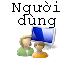
<style>
.page{position:relative;width:71px;height:58px;background:#ffffff}
.page>*{position:absolute;margin:0}
.t1{font:12px/13.3px "CourierNewPSMT";color:#000000}
</style>
<div class="page">
<p class="t1" style="left:12px;top:1px;width:48px;height:27px;text-align:center">Người<br>dùng</p>
</div>
